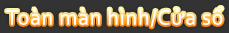
<style>
.page{position:relative;width:229px;height:33px;background:#333333}
.page>*{position:absolute;margin:0}
.t1{font:22px "Corbel";letter-spacing:0.035em;color:#ffffff}
</style>
<div class="page">
<p class="t1" style="left:6px;top:7px;width:217px;height:21px">Toàn màn hình/Cửa sổ</p>
</div>
